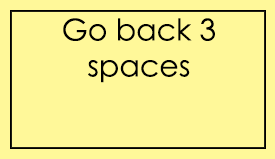
<style>
.page{position:relative;width:275px;height:159px;background:#fff899}
.page>*{position:absolute;margin:0}
.t1{font:30px "CenturyGothic";color:#000000}
</style>
<div class="page">
<p class="t1" style="left:63px;top:18px;width:152px;height:65px;text-align:center">Go back 3 spaces</p>
</div>
